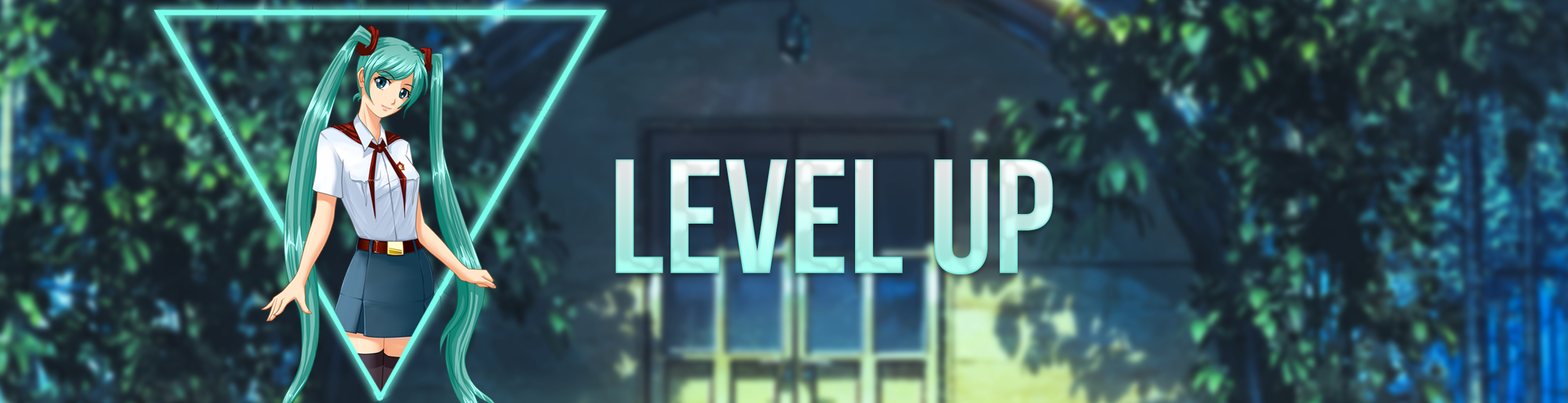
<style>
.page{position:relative;width:1568px;height:403px}
.page>*{position:absolute;margin:0}
.t1{font:162.1px "BebasNeueBold"}
</style>
<div class="page">
<p class="t1" style="left:615px;top:159px;width:438px;height:116px">LEVEL UP</p>
</div>
